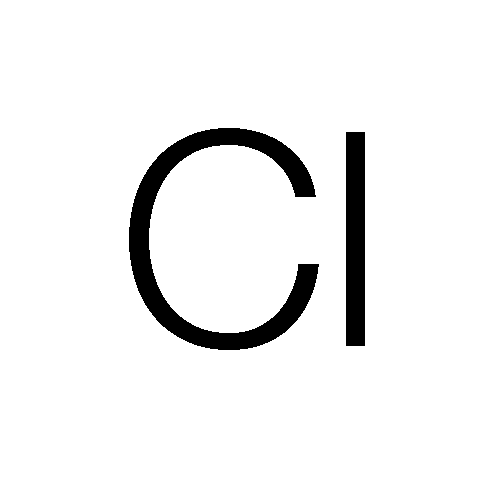
<style>
.page{position:relative;width:500px;height:500px;background:#ffffff}
.page>*{position:absolute;margin:0}
.t1{font:300px "HelveticaNeue-Light";color:#000000}
</style>
<div class="page">
<p class="t1" style="left:129px;top:128px;width:236px;height:222px">Cl</p>
</div>
